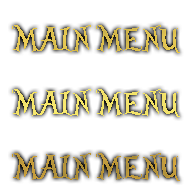
<style>
.page{position:relative;width:192px;height:192px;background:#ffffff}
.page>*{position:absolute;margin:0}
.t1{font:35px "AliceinWonderland";color:#e1c34b}
.t2{font:35px "AliceinWonderland";color:#f6e567}
.t3{font:35px "AliceinWonderland";color:#bd9837}
</style>
<div class="page">
<p class="t1" style="left:12px;top:25px;width:168px;height:28px">MAIN MENU</p>
<p class="t2" style="left:12px;top:89px;width:168px;height:28px">MAIN MENU</p>
<p class="t3" style="left:12px;top:153px;width:168px;height:28px">MAIN MENU</p>
</div>
